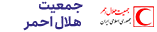
<style>
.page{position:relative;width:157px;height:32px;background:#ffffff}
.page>*{position:absolute;margin:0}
.t1{font:13.2px "Anjoman-Bold";letter-spacing:-0.02em;color:#312783;scale:1.06 1}
</style>
<div class="page">
<p class="t1" style="left:23px;top:1px;width:60px;height:30px">جمعیت<br> هلال احمر</p>
</div>
